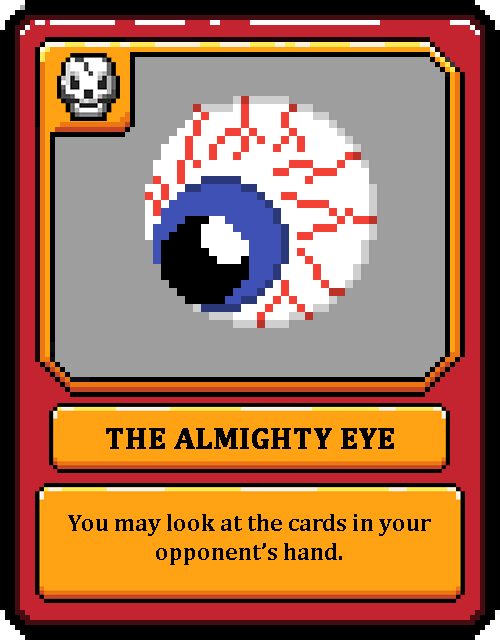
<style>
.page{position:relative;width:500px;height:640px;background:#9e9e9e}
.page>*{position:absolute;margin:0}
.t1{font:30px "Cambria-Bold";color:#000000;text-transform:uppercase;font-weight:bold}
.t2{font:24px "Cambria-Bold";color:#000000}
</style>
<div class="page">
<p class="t1" style="left:106px;top:428px;width:288px;height:21px">The Almighty Eye</p>
<p class="t2" style="left:68px;top:514px;width:363px;height:51px;text-align:center">You may look at the cards in your opponent’s hand.</p>
</div>
